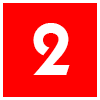
<style>
.page{position:relative;width:100px;height:100px;background:#ff0000}
.page>*{position:absolute;margin:0}
.t1{font:72px "ELEGANCE";color:#ffffff}
</style>
<div class="page">
<p class="t1" style="left:33px;top:23px;width:37px;height:52px">2</p>
</div>
